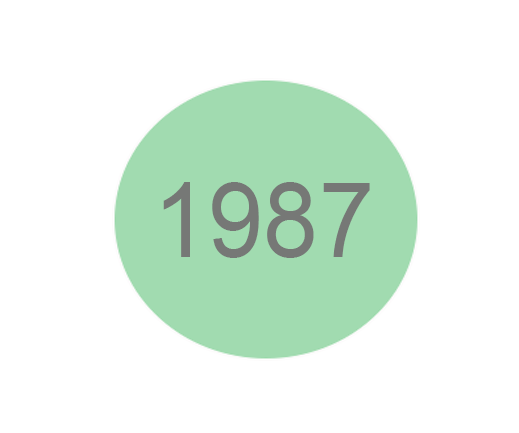
<style>
.page{position:relative;width:519px;height:433px;background:#ffffff}
.page>*{position:absolute;margin:0}
.t1{font:104.8px "ArialMT";color:#767876;scale:0.95 1}
</style>
<div class="page">
<p class="t1" style="left:163px;top:182px;width:207px;height:76px">1987</p>
</div>
